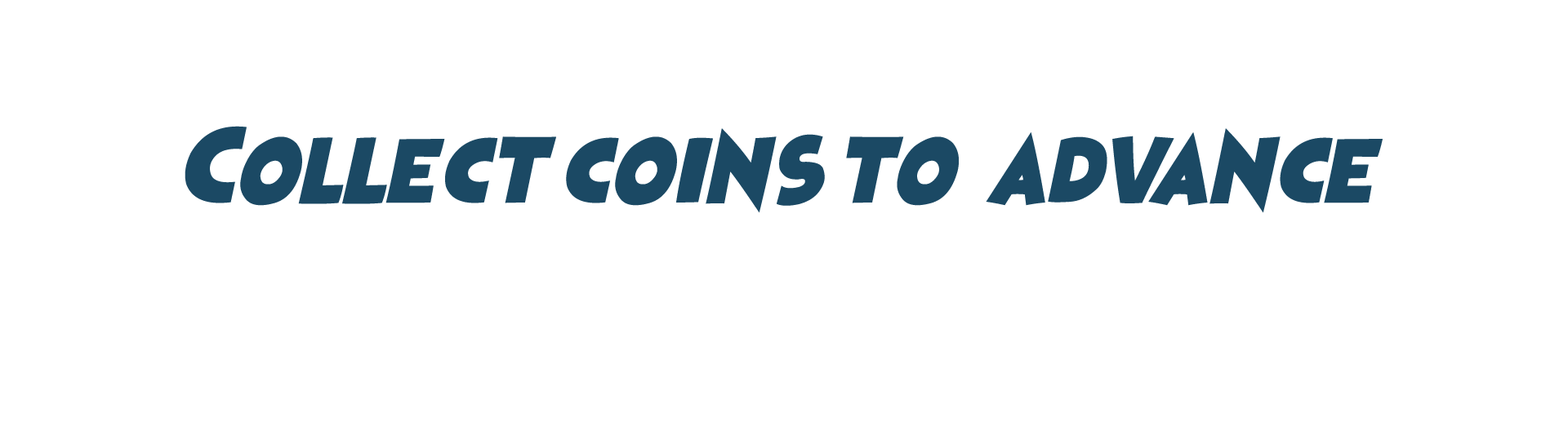
<style>
.page{position:relative;width:1568px;height:441px;background:#ffffff}
.page>*{position:absolute;margin:0}
.t1{font:61.3px "HeroesLegend";color:#1b4964}
</style>
<div class="page">
<p class="t1" style="left:185px;top:126px;width:1198px;height:87px">Collect coins to  advance</p>
</div>
